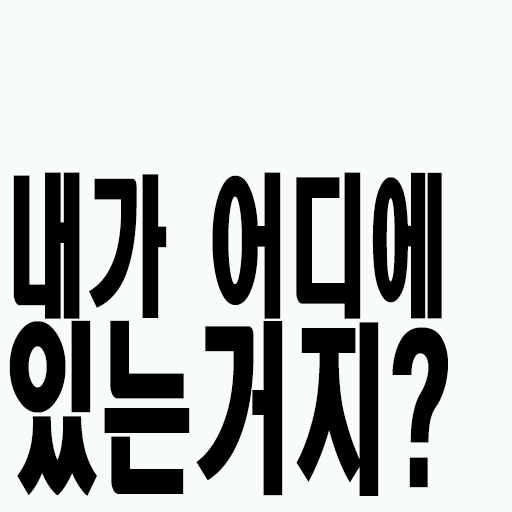
<style>
.page{position:relative;width:512px;height:512px;background:#f8fcf8}
.page>*{position:absolute;margin:0}
.t1{font:152px/160px "HeadlineR-HM";color:#000000;scale:0.53 1}
.t2{font:182.4px/160px "HeadlineR-HM";color:#000000;scale:0.53 1}
</style>
<div class="page">
<p class="t1" style="left:9px;top:172px;width:439px;height:324px;text-align:center">내가 어디에<br><span class="t2">있는거지?</span></p>
</div>
